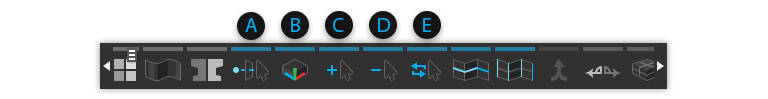
<style>
.page{position:relative;width:768px;height:99px;background:#ffffff}
.page>*{position:absolute;margin:0}
.t1{font:15.4px "MyriadPro-Regular";color:#00aaef;text-transform:uppercase}
</style>
<div class="page">
<p class="t1" style="left:245px;top:18px;width:12px;height:14px">a</p>
<p class="t1" style="left:291px;top:18px;width:9px;height:14px">b</p>
<p class="t1" style="left:333px;top:18px;width:11px;height:14px">c</p>
<p class="t1" style="left:378px;top:18px;width:12px;height:14px">d</p>
<p class="t1" style="left:423px;top:18px;width:8px;height:14px">e</p>
</div>
